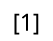
<style>
.page{position:relative;width:53px;height:41px;background:#ffffff}
.page>*{position:absolute;margin:0}
.t1{font:23.7px "DroidSans";color:#000000}
</style>
<div class="page">
<p class="t1" style="left:14px;top:13px;width:25px;height:22px">[1]</p>
</div>
